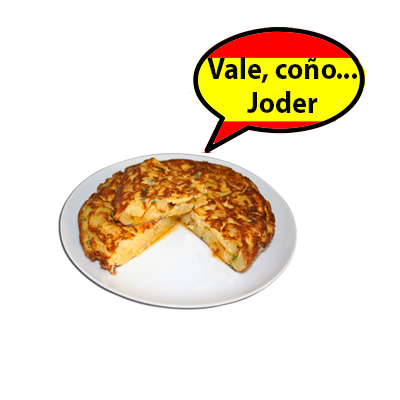
<style>
.page{position:relative;width:400px;height:400px;background:#ffffff}
.page>*{position:absolute;margin:0}
.t1{font:30.9px/34.4px "MyriadPro-Bold";color:#080808;scale:0.92 1}
</style>
<div class="page">
<p class="t1" style="left:207px;top:57px;width:150px;height:56px;text-align:center">Vale, coño...<br>Joder</p>
</div>
